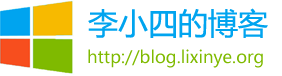
<style>
.page{position:relative;width:282px;height:76px;background:#ffffff}
.page>*{position:absolute;margin:0}
.t1{font:30px "MicrosoftYaHei";color:#00a4ef}
.t2{font:17px "MicrosoftYaHei";color:#7fba00}
</style>
<div class="page">
<p class="t1" style="left:88px;top:8px;width:180px;height:30px">李小四的博客</p>
<p class="t2" style="left:88px;top:49px;width:175px;height:19px">http://blog.lixinye.org</p>
</div>
